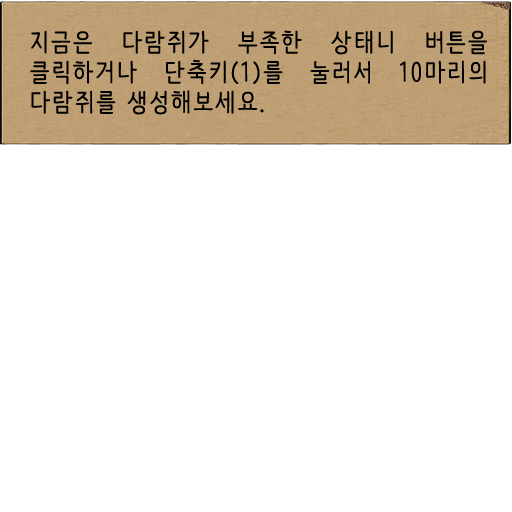
<style>
.page{position:relative;width:512px;height:512px;background:#ffffff}
.page>*{position:absolute;margin:0}
.t1{font:25px "NanumBarunpen";letter-spacing:0.075em;color:#000000;font-weight:bold}
</style>
<div class="page">
<p class="t1" style="left:30px;top:30px;width:457px;height:85px;text-align:justify">지금은 다람쥐가 부족한 상태니 버튼을 클릭하거나 단축키(1)를 눌러서 10마리의 다람쥐를 생성해보세요.</p>
</div>
